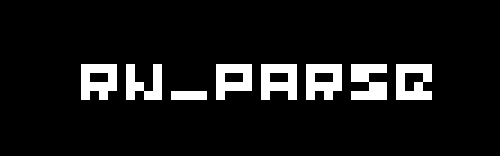
<style>
.page{position:relative;width:500px;height:156px;background:#000000}
.page>*{position:absolute;margin:0}
.t1{font:72px "Percy-Pixel";color:#ffffff}
</style>
<div class="page">
<p class="t1" style="left:81px;top:64px;width:351px;height:36px">RW_PARSE</p>
</div>
